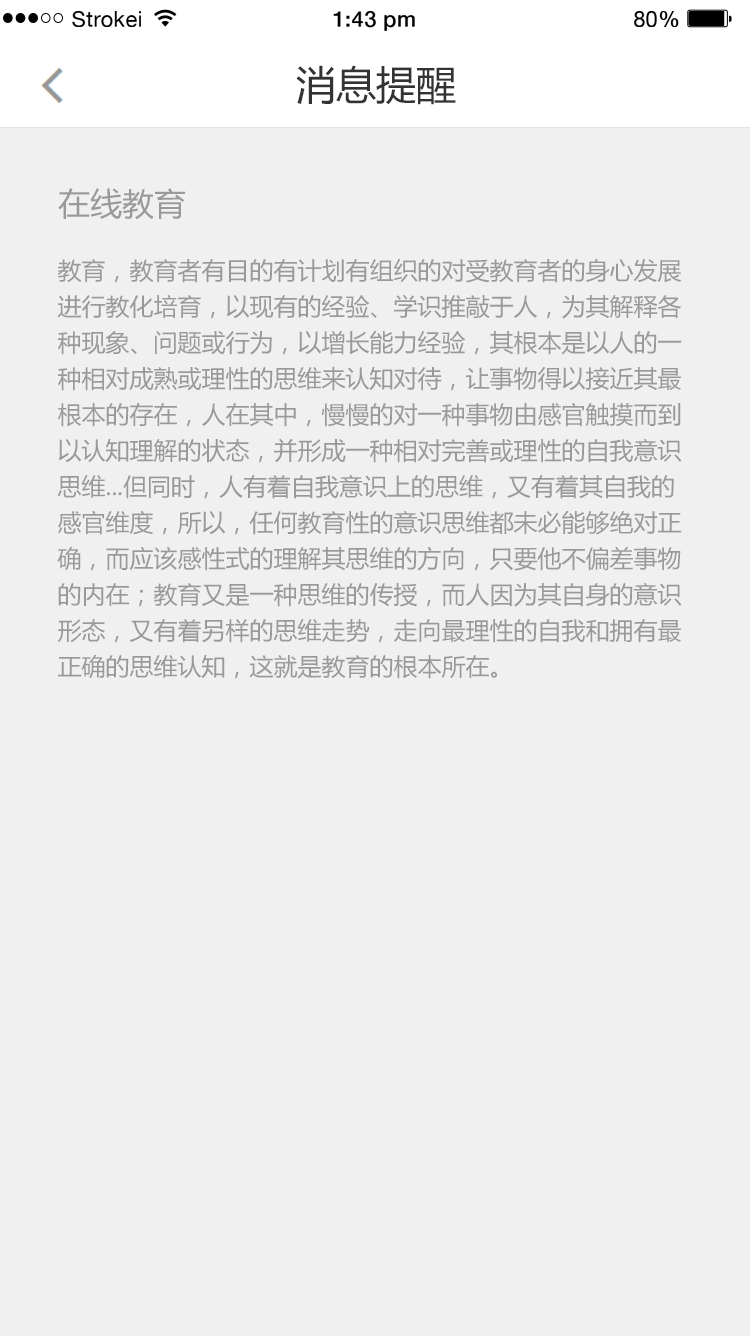
<style>
.page{position:relative;width:750px;height:1336px;background:#f0f0f0}
.page>*{position:absolute;margin:0}
.t1{font:21.8px "HelveticaNeue";letter-spacing:0.02em;color:#000000}
.t2{font:21.8px "HelveticaNeue-Medium";letter-spacing:0.02em;color:#000000}
.t3{font:40px "MicrosoftYaHei";color:#333333}
.t4{font:32px "MicrosoftYaHei";color:#999999}
.t5{font:24px/36px "MicrosoftYaHei";color:#999999}
</style>
<div class="page">
<p class="t1" style="left:72px;top:11px;width:69px;height:16px">Strokei</p>
<p class="t2" style="left:333px;top:11px;width:82px;height:20px">1:43 pm</p>
<p class="t1" style="left:634px;top:11px;width:45px;height:16px">80<span class="t2">%</span></p>
<p class="t3" style="left:296px;top:65px;width:160px;height:40px">消息提醒</p>
<p class="t4" style="left:58px;top:188px;width:127px;height:32px">在线教育</p>
<p class="t5" style="left:57px;top:258px;width:625px;height:421px">教育，教育者有目的有计划有组织的对受教育者的身心发展进行教化培育，以现有的经验、学识推敲于人，为其解释各种现象、问题或行为，以增长能力经验，其根本是以人的一种相对成熟或理性的思维来认知对待，让事物得以接近其最根本的存在，人在其中，慢慢的对一种事物由感官触摸而到以认知理解的状态，并形成一种相对完善或理性的自我意识思维...但同时，人有着自我意识上的思维，又有着其自我的感官维度，所以，任何教育性的意识思维都未必能够绝对正确，而应该感性式的理解其思维的方向，只要他不偏差事物的内在；教育又是一种思维的传授，而人因为其自身的意识形态，又有着另样的思维走势，走向最理性的自我和拥有最正确的思维认知，这就是教育的根本所在。</p>
</div>
